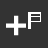
<style>
.page{position:relative;width:48px;height:48px;background:#333333}
.page>*{position:absolute;margin:0}
.t1{font:30px "Verdana-Bold";color:#ffffff}
</style>
<div class="page">
<p class="t1" style="left:6px;top:15px;width:20px;height:21px">+</p>
</div>
